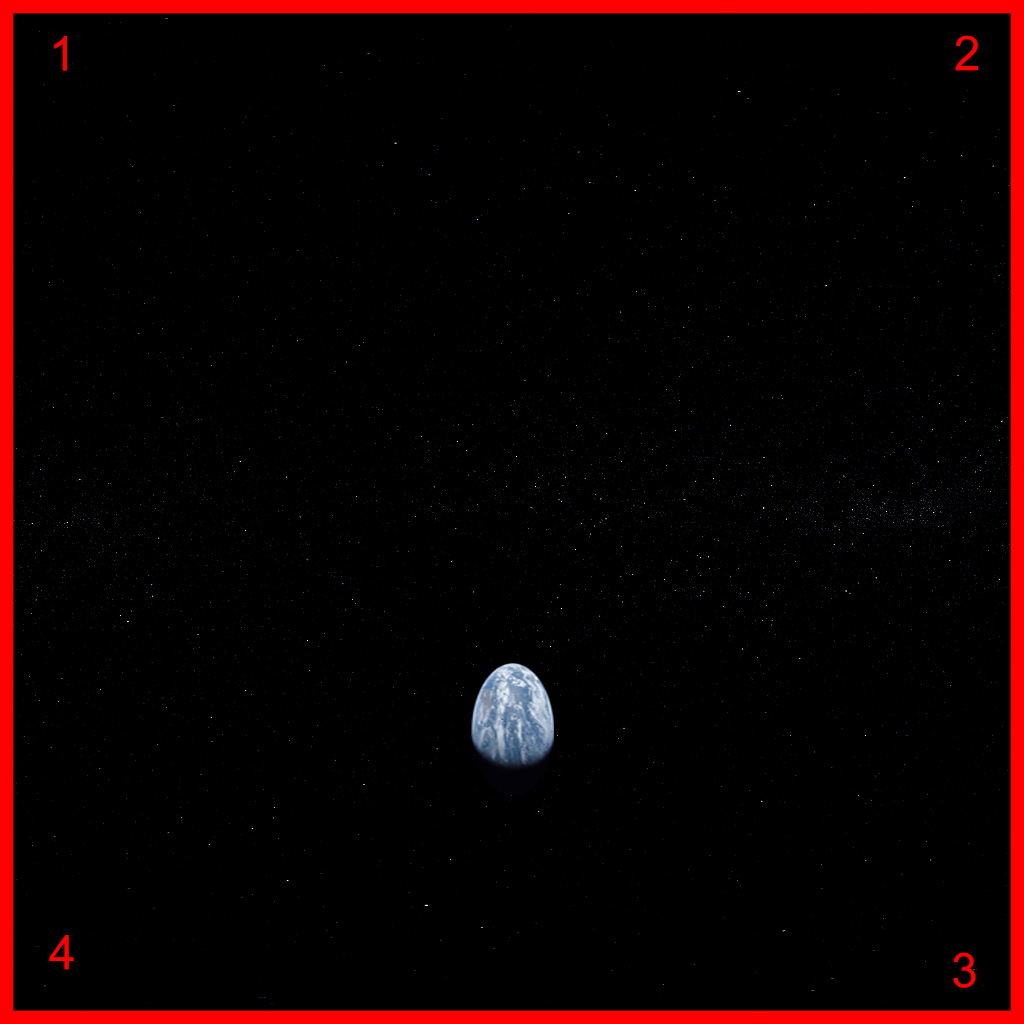
<style>
.page{position:relative;width:1024px;height:1024px;background:#000000}
.page>*{position:absolute;margin:0}
.t1{font:48px "ArialMT";color:#ff0000}
</style>
<div class="page">
<p class="t1" style="left:54px;top:36px;width:13px;height:35px">1</p>
<p class="t1" style="left:955px;top:35px;width:23px;height:36px">2</p>
<p class="t1" style="left:49px;top:935px;width:25px;height:35px">4</p>
<p class="t1" style="left:953px;top:952px;width:23px;height:36px">3</p>
</div>
